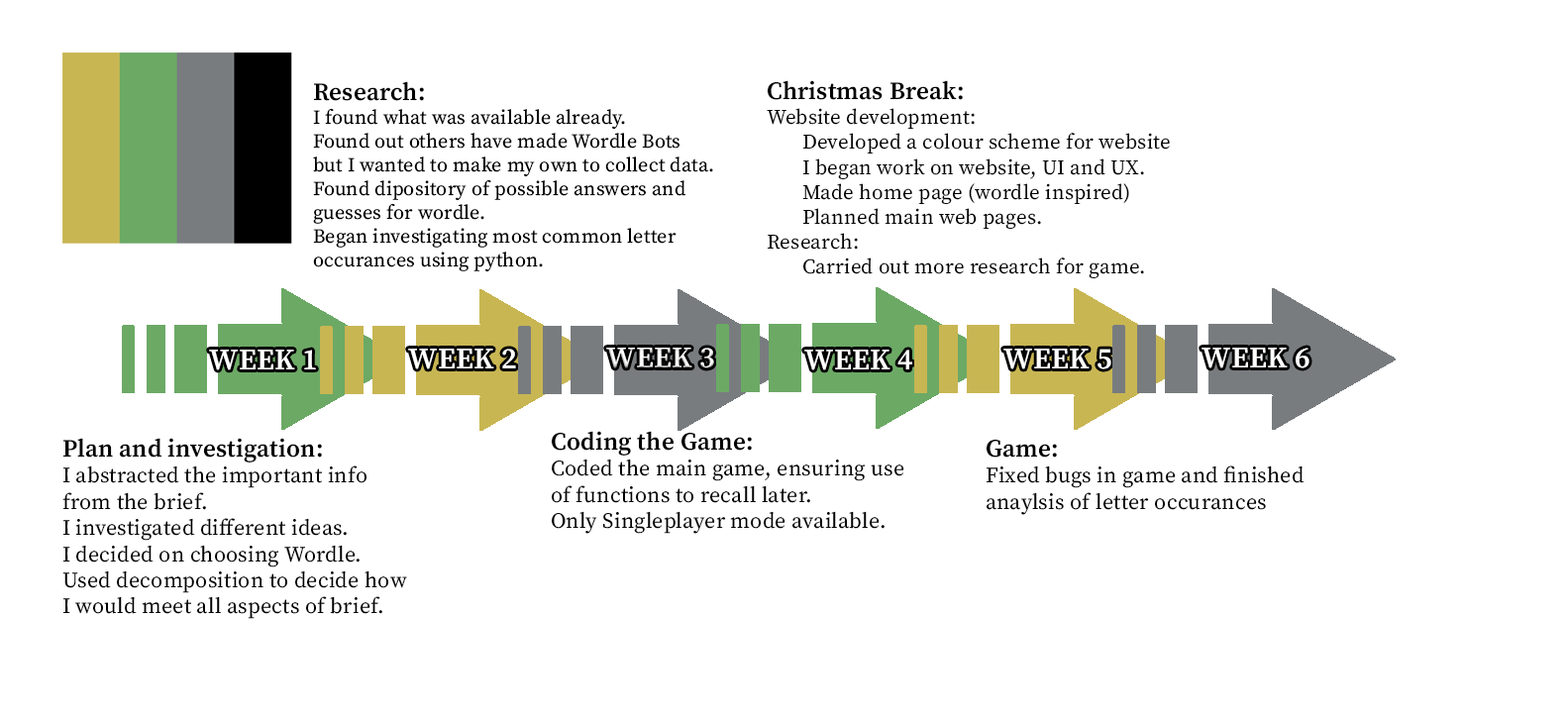
<style>
.page{position:relative;width:1568px;height:718px;background:#ffffff}
.page>*{position:absolute;margin:0}
.t1{font:19.8px "SourceSerifRoman-Regular";letter-spacing:0.01em;color:#000000}
.t2{font:24.8px "SourceSerifRoman-Semibold";letter-spacing:0.01em;color:#000000}
.t3{font:20.8px "SourceSerifRoman-Regular";letter-spacing:0.01em;color:#000000}
.t4{font:29.7px "SourceSerifRoman-Semibold";letter-spacing:0.01em;color:#ffffff}
.t5{font:21.8px "SourceSerifRoman-Regular";letter-spacing:0.01em;color:#000000}
</style>
<div class="page">
<p class="t1" style="left:313px;top:81px;width:400px;height:191px"><span class="t2">Research:<br></span>I found what was available already.<br>Found out others have made Wordle Bots<br>but I wanted to make my own to collect data.<br>Found dipository of possible answers and <br>guesses for wordle.<br>Began investigating most common letter <br>occurances using python.</p>
<p class="t3" style="left:767px;top:80px;width:403px;height:198px"><span class="t2">Christmas Break:<br></span>Website development:<br> Developed a colour scheme for website<br> I began work on website, UI and UX.<br> Made home page (wordle inspired)<br> Planned main web pages.<br>Research:<br> Carried out more research for game.</p>
<p class="t4" style="left:209px;top:350px;width:107px;height:20px">WEEK 1</p>
<p class="t4" style="left:408px;top:349px;width:108px;height:20px">WEEK 2</p>
<p class="t4" style="left:606px;top:348px;width:108px;height:20px">WEEK 3</p>
<p class="t4" style="left:804px;top:350px;width:108px;height:20px">WEEK 4</p>
<p class="t4" style="left:1003px;top:349px;width:108px;height:20px">WEEK 5</p>
<p class="t4" style="left:1202px;top:348px;width:107px;height:20px">WEEK 6</p>
<p class="t5" style="left:62px;top:438px;width:345px;height:181px"><span class="t2">Plan and investigation:<br></span>I abstracted the important info <br>from the brief.<br>I investigated different ideas.<br>I decided on choosing Wordle.<br>Used decomposition to decide how<br>I would meet all aspects of brief.</p>
<p class="t5" style="left:551px;top:431px;width:353px;height:103px"><span class="t2">Coding the Game:<br></span>Coded the main game, ensuring use<br>of functions to recall later.<br>Only Singleplayer mode available.</p>
<p class="t5" style="left:986px;top:439px;width:319px;height:76px"><span class="t2">Game:<br></span>Fixed bugs in game and finished<br>anaylsis of letter occurances</p>
</div>
